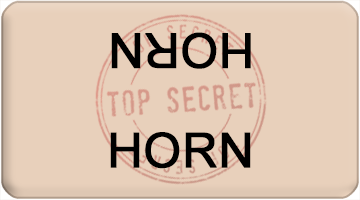
<style>
.page{position:relative;width:360px;height:200px;background:#e8d0bb}
.page>*{position:absolute;margin:0}
.t1{font:48px "ArialMT";color:#000000;font-weight:bold}
</style>
<div class="page">
<p class="t1" style="left:111px;top:32px;width:140px;height:37px;rotate:180deg">HORN</p>
<p class="t1" style="left:110px;top:132px;width:141px;height:37px">HORN</p>
</div>
